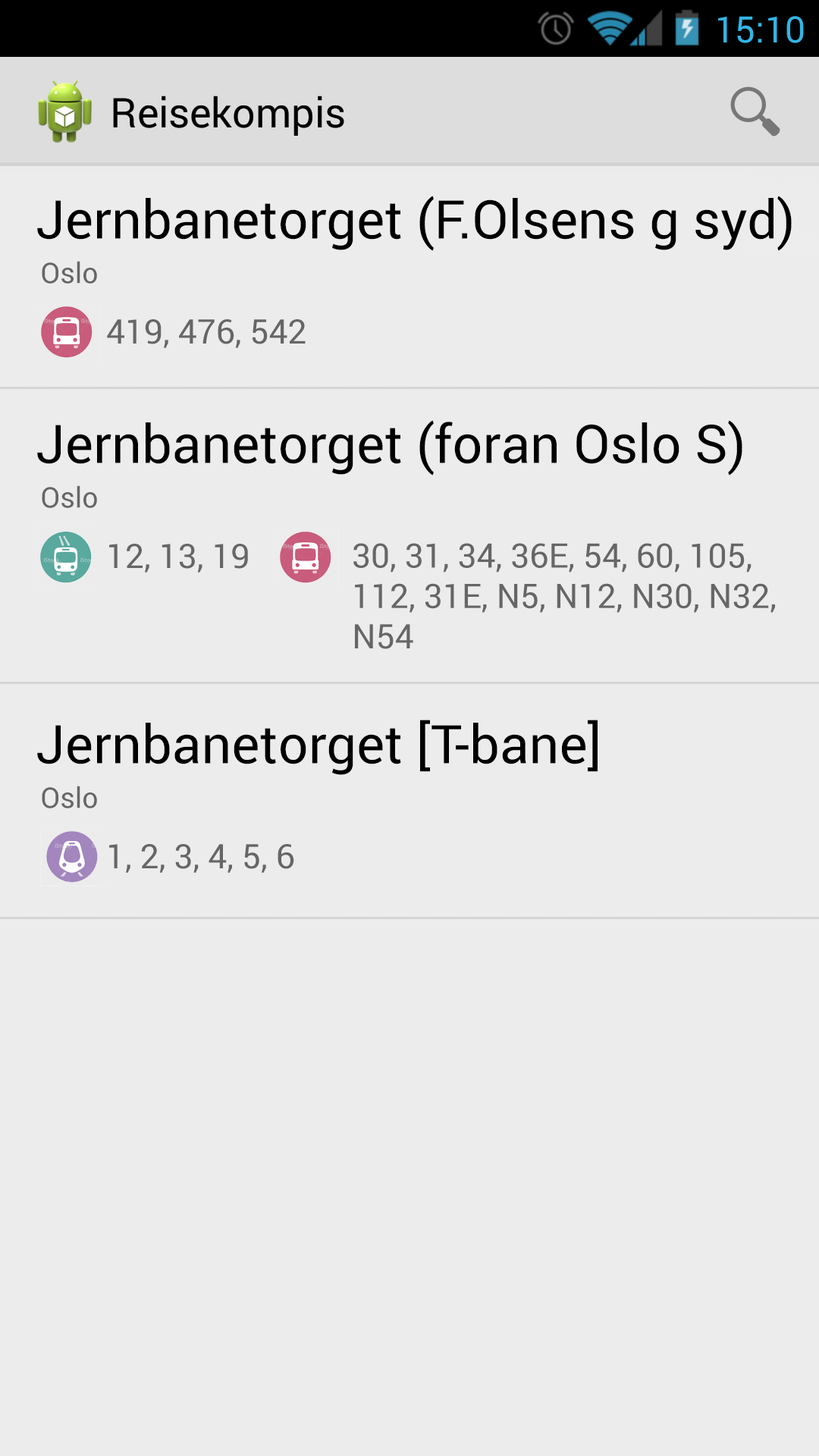
<style>
.page{position:relative;width:819px;height:1456px;background:#ececec}
.page>*{position:absolute;margin:0}
.t1{font:53.3px "Roboto-Regular";color:#000000}
.t2{font:28.5px "Roboto-Regular";color:#676565}
.t3{font:33.7px "Roboto-Regular";color:#676565}
</style>
<div class="page">
<p class="t1" style="left:37px;top:196px;width:755px;height:55px">Jernbanetorget (F.Olsens g syd)</p>
<p class="t2" style="left:42px;top:261px;width:55px;height:23px">Oslo</p>
<p class="t3" style="left:107px;top:319px;width:199px;height:29px">419, 476, 542</p>
<p class="t1" style="left:37px;top:420px;width:705px;height:55px">Jernbanetorget (foran Oslo S)</p>
<p class="t2" style="left:42px;top:485px;width:55px;height:23px">Oslo</p>
<p class="t3" style="left:109px;top:544px;width:139px;height:29px">12, 13, 19</p>
<p class="t3" style="left:353px;top:543px;width:422px;height:106px">30, 31, 34, 36E, 54, 60, 105, 112, 31E, N5, N12, N30, N32, N54</p>
<p class="t1" style="left:37px;top:720px;width:561px;height:55px">Jernbanetorget [T-bane]</p>
<p class="t2" style="left:42px;top:786px;width:55px;height:22px">Oslo</p>
<p class="t3" style="left:109px;top:844px;width:185px;height:29px">1, 2, 3, 4, 5, 6</p>
</div>
